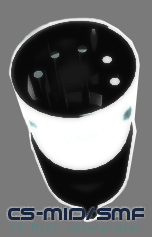
<style>
.page{position:relative;width:152px;height:237px;background:#7a7a7a}
.page>*{position:absolute;margin:0}
.t1{font:15.2px "AmalgamR";color:#19263f}
.t2{font:10px "OCRAStd";color:#648181}
</style>
<div class="page">
<p class="t1" style="left:8px;top:208px;width:136px;height:12px">cs-MID/SMF</p>
<p class="t2" style="left:11px;top:223px;width:131px;height:10px">CS MIDI Interpreter</p>
</div>
